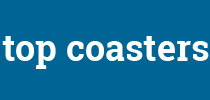
<style>
.page{position:relative;width:210px;height:100px;background:#006594}
.page>*{position:absolute;margin:0}
.t1{font:36px "RobotoSlab-Bold";color:#ffffff}
</style>
<div class="page">
<p class="t1" style="left:2px;top:36px;width:207px;height:33px">top coasters</p>
</div>
